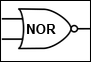
<style>
.page{position:relative;width:91px;height:62px;background:#ffffff}
.page>*{position:absolute;margin:0}
.t1{font:13.3px "Arial-BoldMT";color:#000000}
</style>
<div class="page">
<p class="t1" style="left:27px;top:24px;width:29px;height:10px">NOR</p>
</div>
